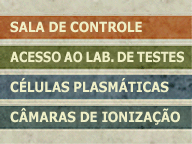
<style>
.page{position:relative;width:192px;height:144px}
.page>*{position:absolute;margin:0}
.t1{font:14px "Verdana-Bold";letter-spacing:-0.02em;color:#efefc6;scale:0.88 1}
.t2{font:14px "Verdana-Bold";letter-spacing:-0.02em;color:#efefc6;scale:0.84 1}
</style>
<div class="page">
<p class="t1" style="left:10px;top:21px;width:132px;height:12px">SALA DE CONTROLE</p>
<p class="t2" style="left:10px;top:51px;width:174px;height:12px">ACESSO AO LAB. DE TESTES</p>
<p class="t1" style="left:10px;top:78px;width:159px;height:15px">CÉLULAS PLASMÁTICAS</p>
<p class="t1" style="left:10px;top:108px;width:170px;height:17px">CÂMARAS DE IONIZAÇÃO</p>
</div>
